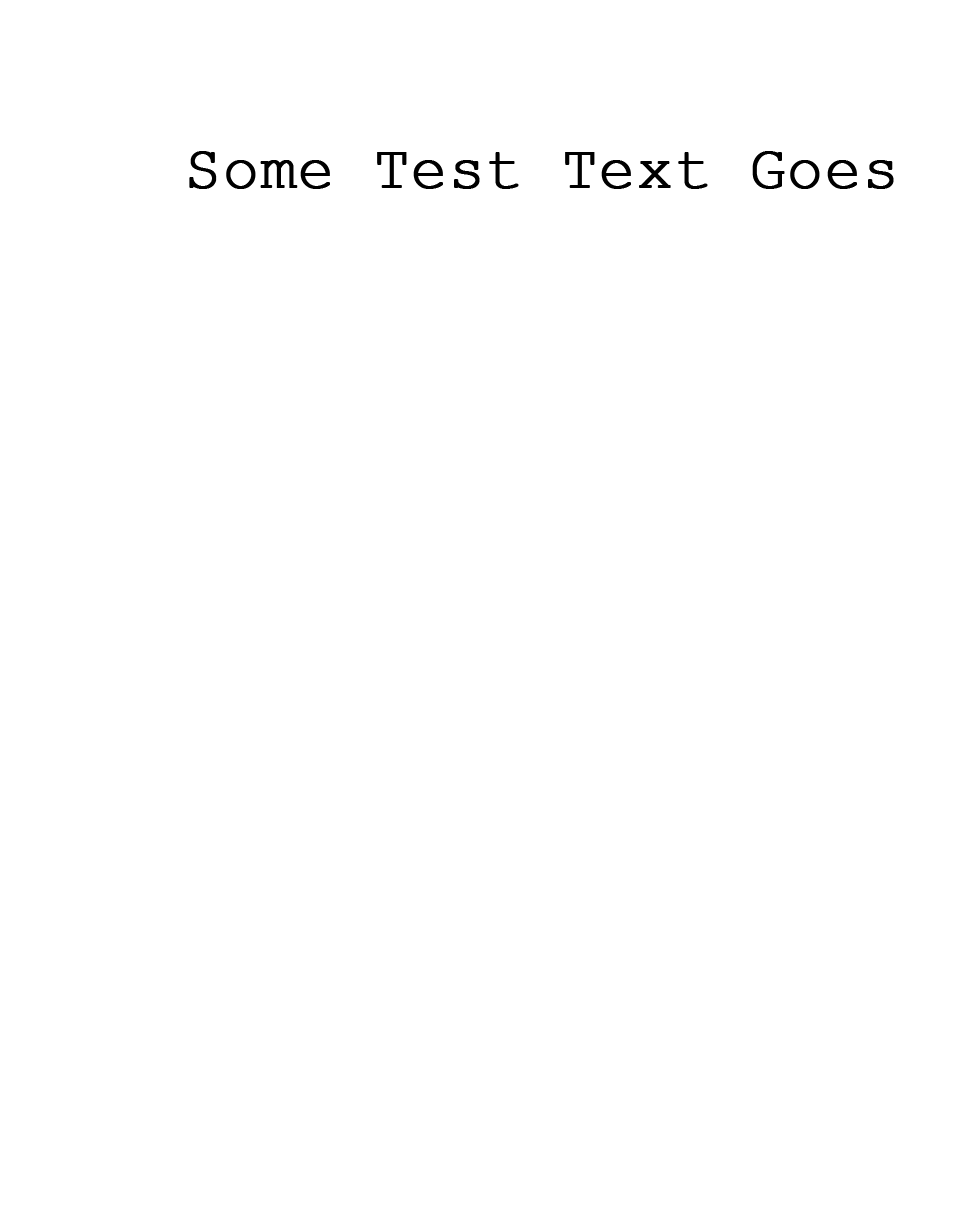
<style>
.page{position:relative;width:955px;height:1226px;background:#ffffff}
.page>*{position:absolute;margin:0}
.t1{font:60px "CourierNewPSMT";color:#000000;font-weight:bold}
</style>
<div class="page">
<p class="t1" style="left:189px;top:151px;width:705px;height:38px">Some Test Text Goes</p>
</div>
